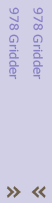
<style>
.page{position:relative;width:52px;height:203px;background:#d1cfe6}
.page>*{position:absolute;margin:0}
.t1{font:12px "Verdana";color:#867fc5}
</style>
<div class="page">
<p class="t1" style="left:9px;top:7px;width:10px;height:73px;rotate:90deg">978 Gridder</p>
<p class="t1" style="left:33px;top:7px;width:10px;height:73px;rotate:90deg">978 Gridder</p>
</div>
